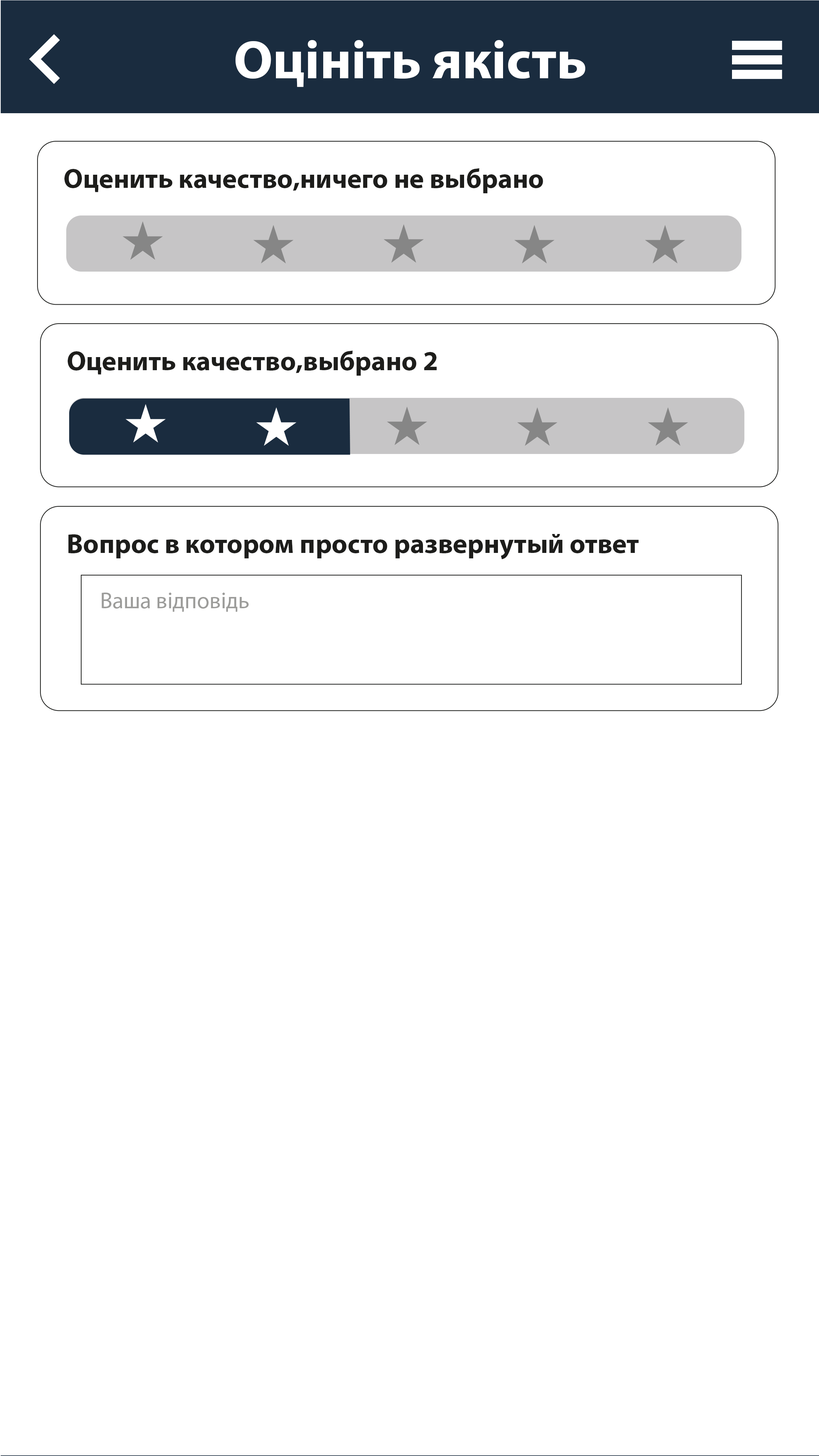
<style>
.page{position:relative;width:819px;height:1456px;background:#ffffff}
.page>*{position:absolute;margin:0}
.t1{font:54.6px "MyriadPro-Bold";color:#ffffff}
.t2{font:27.3px "MyriadPro-Bold";color:#1d1d1b}
.t3{font:22.7px "MyriadPro-Regular";color:#9c9c9a}
</style>
<div class="page">
<p class="t1" style="left:236px;top:40px;width:349px;height:47px">Оцініть якість</p>
<p class="t2" style="left:64px;top:168px;width:479px;height:25px">Оценить качество,ничего не выбрано</p>
<p class="t2" style="left:68px;top:351px;width:369px;height:25px">Оценить качество,выбрано 2</p>
<p class="t2" style="left:68px;top:534px;width:571px;height:25px">Вопрос в котором просто развернутый ответ</p>
<p class="t3" style="left:102px;top:593px;width:147px;height:19px">Ваша відповідь</p>
</div>
